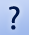
<style>
.page{position:relative;width:29px;height:35px}
.page>*{position:absolute;margin:0}
.t1{font:33px "MyriadPro-Regular";color:#00164a}
</style>
<div class="page">
<p class="t1" style="left:9px;top:6px;width:11px;height:24px">?</p>
</div>
